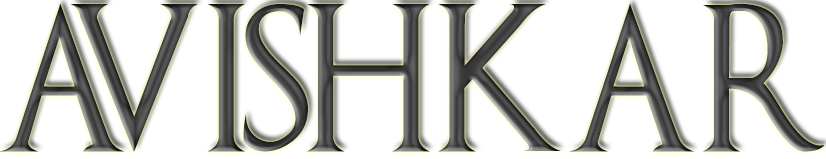
<style>
.page{position:relative;width:826px;height:159px;background:#ffffff}
.page>*{position:absolute;margin:0}
.t1{font:147.2px "GameofThrones";scale:0.87 1}
</style>
<div class="page">
<p class="t1" style="left:0px;top:3px;width:824px;height:149px">Avishkar</p>
</div>
